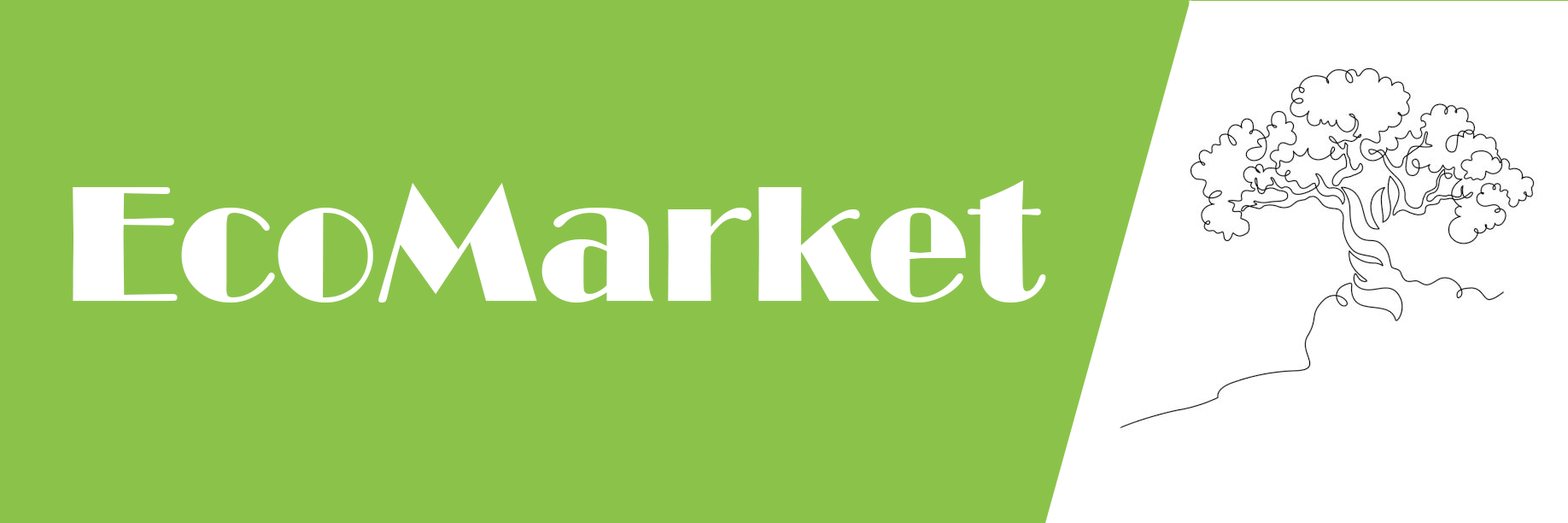
<style>
.page{position:relative;width:1568px;height:523px;background:#8bc34a}
.page>*{position:absolute;margin:0}
.t1{font:170.8px "Broadway";color:#ffffff}
</style>
<div class="page">
<p class="t1" style="left:73px;top:180px;width:973px;height:122px">EcoMarket</p>
</div>
